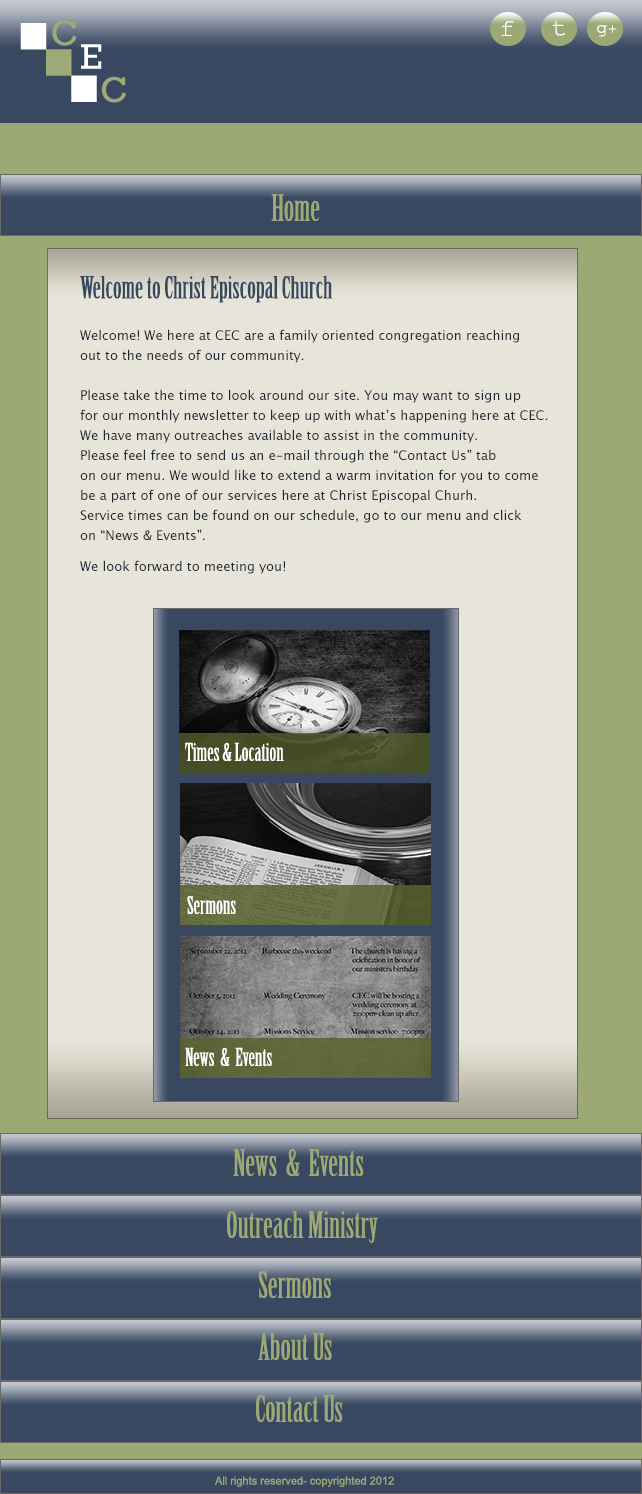
<style>
.page{position:relative;width:642px;height:1494px;background:#e7e5d9}
.page>*{position:absolute;margin:0}
.t1{font:24px "CourierNewPSMT";color:#ffffff;scale:1.1 1}
.t2{font:18px "CourierNewPSMT";color:#ffffff;scale:1.1 1}
.t3{font:14px "CourierNewPSMT";color:#ffffff;scale:1.1 1}
.t4{font:36px "BirchStd";color:#9ca974}
.t5{font:30px "BirchStd";color:#384861}
.t6{font:13px/20px "LucidaGrande";color:#232733}
.t7{font:13px "LucidaGrande";color:#232733}
.t8{font:24px "BirchStd";color:#fefefe}
.t9{font:11.1px "ArialMT";color:#9ca974}
</style>
<div class="page">
<p class="t1" style="left:501px;top:21px;width:13px;height:15px">f</p>
<p class="t1" style="left:552px;top:21px;width:13px;height:15px">t</p>
<p class="t2" style="left:597px;top:25px;width:20px;height:12px">g<span class="t3">+</span></p>
<p class="t4" style="left:271px;top:194px;width:49px;height:27px">Home</p>
<p class="t5" style="left:80px;top:276px;width:253px;height:27px">Welcome to Christ Episcopal Church</p>
<p class="t6" style="left:80px;top:329px;width:468px;height:245px">Welcome! We here at CEC are a family oriented congregation reaching <br>out to the needs of our community. <br><br>Please take the time to look around our site. You may want to sign up <br>for our monthly newsletter to keep up with what’s happening here at CEC. <br>We have many outreaches available to assist in the community. <br>Please feel free to send us an e-mail through the “Contact Us” tab <br>on our menu. We would like to extend a warm invitation for you to come <br>be a part of one of our services here at Christ Episcopal Churh. <br>Service times can be found on our schedule, go to our menu and click <br>on “News &amp; Events”.<br><span class="t7"><br>We look forward to meeting you!</span></p>
<p class="t8" style="left:185px;top:742px;width:99px;height:19px">Times &amp; Location</p>
<p class="t8" style="left:187px;top:895px;width:49px;height:19px">Sermons</p>
<p class="t8" style="left:185px;top:1047px;width:87px;height:19px">News  &amp;  Events</p>
<p class="t4" style="left:233px;top:1149px;width:131px;height:27px">News  &amp;  Events</p>
<p class="t4" style="left:227px;top:1211px;width:151px;height:32px">Outreach Ministry</p>
<p class="t4" style="left:258px;top:1271px;width:73px;height:27px">Sermons</p>
<p class="t4" style="left:258px;top:1333px;width:74px;height:27px">About Us</p>
<p class="t4" style="left:256px;top:1395px;width:87px;height:27px">Contact Us</p>
<p class="t9" style="left:215px;top:1476px;width:179px;height:11px">All rights reserved- copyrighted 2012</p>
</div>
